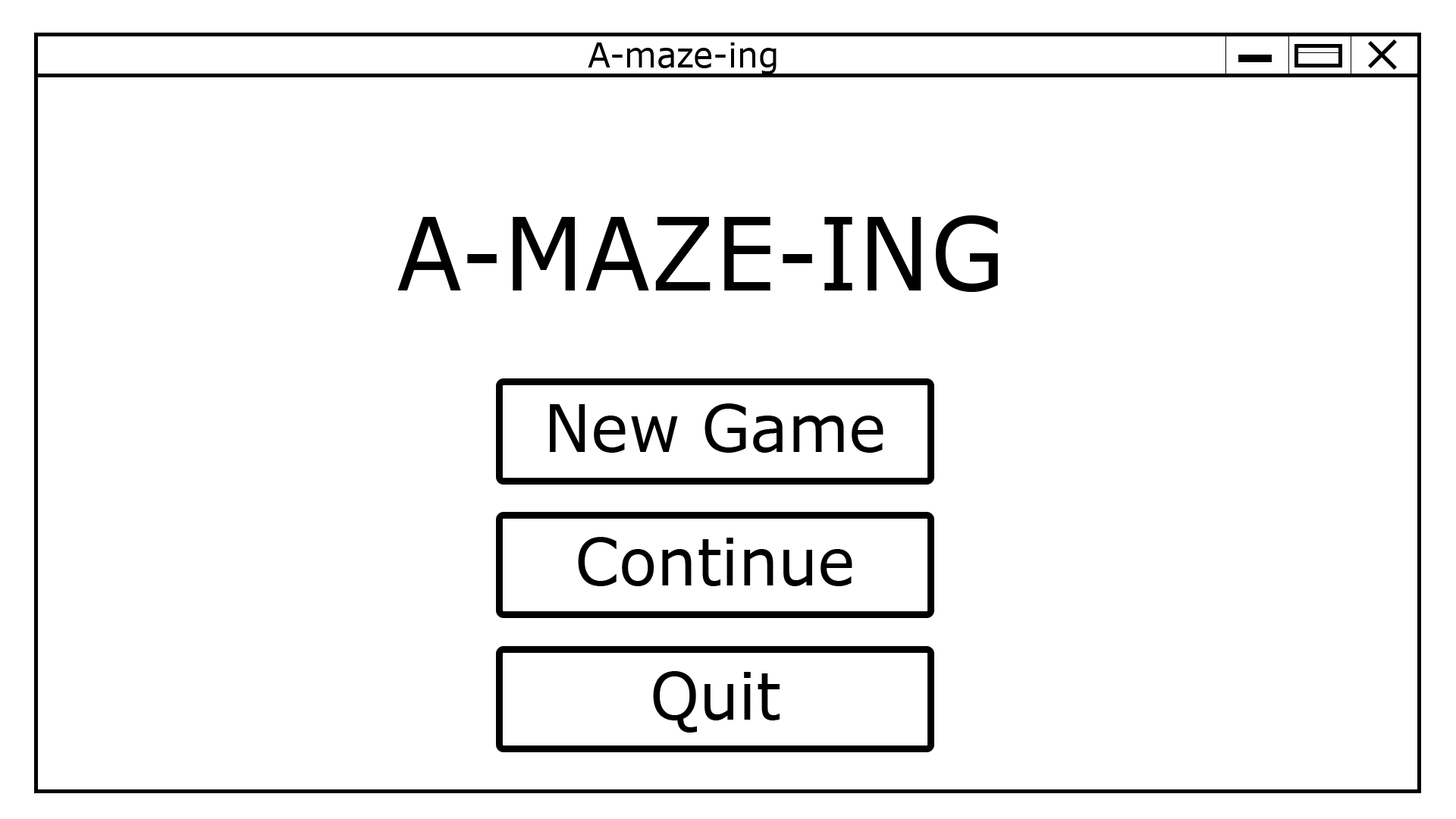
<style>
.page{position:relative;width:1456px;height:819px;background:#ffffff}
.page>*{position:absolute;margin:0}
.t1{font:34.7px "Verdana";color:#000000;scale:0.95 1}
.t2{font:100.9px "Verdana";color:#000000;scale:0.95 1}
.t3{font:66px "Verdana";color:#000000;scale:0.95 1}
</style>
<div class="page">
<p class="t1" style="left:588px;top:42px;width:189px;height:32px">A-maze-ing</p>
<p class="t2" style="left:397px;top:215px;width:601px;height:77px">A-MAZE-ING</p>
<p class="t3" style="left:550px;top:403px;width:333px;height:50px">New Game</p>
<p class="t3" style="left:578px;top:537px;width:274px;height:49px">Continue</p>
<p class="t3" style="left:653px;top:671px;width:127px;height:62px">Quit</p>
</div>
